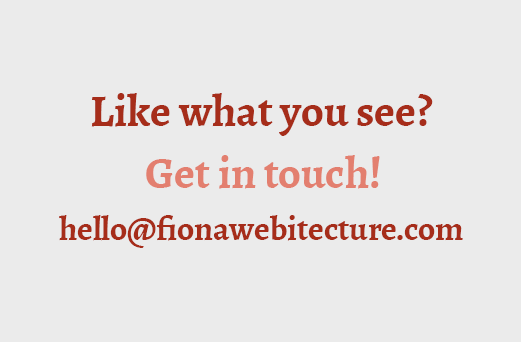
<style>
.page{position:relative;width:521px;height:342px;background:#ebebeb}
.page>*{position:absolute;margin:0}
.t1{font:44.8px "Alegreya-Bold";color:#a62d1a}
.t2{font:44.8px "Alegreya-Bold";color:#e37f6f}
.t3{font:33.6px "Alegreya-Bold";color:#a62d1a}
</style>
<div class="page">
<p class="t1" style="left:91px;top:93px;width:342px;height:43px">Like what you see?</p>
<p class="t2" style="left:146px;top:155px;width:234px;height:34px">Get in touch!</p>
<p class="t3" style="left:59px;top:215px;width:404px;height:33px">hello@fionawebitecture.com</p>
</div>
